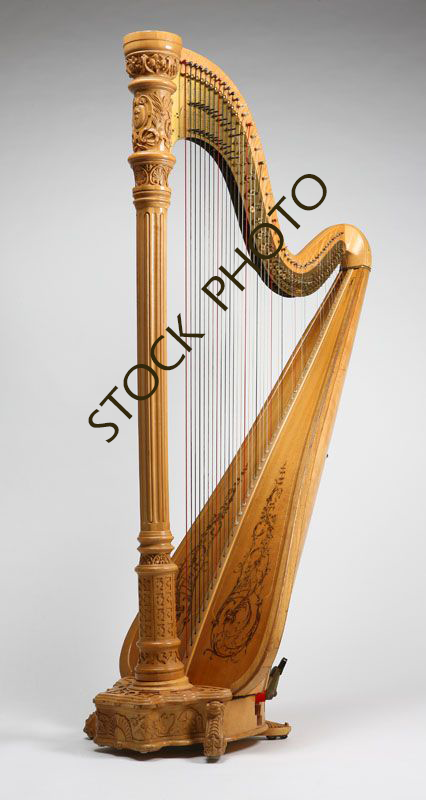
<style>
.page{position:relative;width:426px;height:800px}
.page>*{position:absolute;margin:0}
.t1{font:49.5px "ErasITC-Medium";color:#32280b}
</style>
<div class="page">
<p class="t1" style="left:88px;top:174px;width:239px;height:269px;rotate:-49deg">STOCK  PHOTO</p>
</div>
